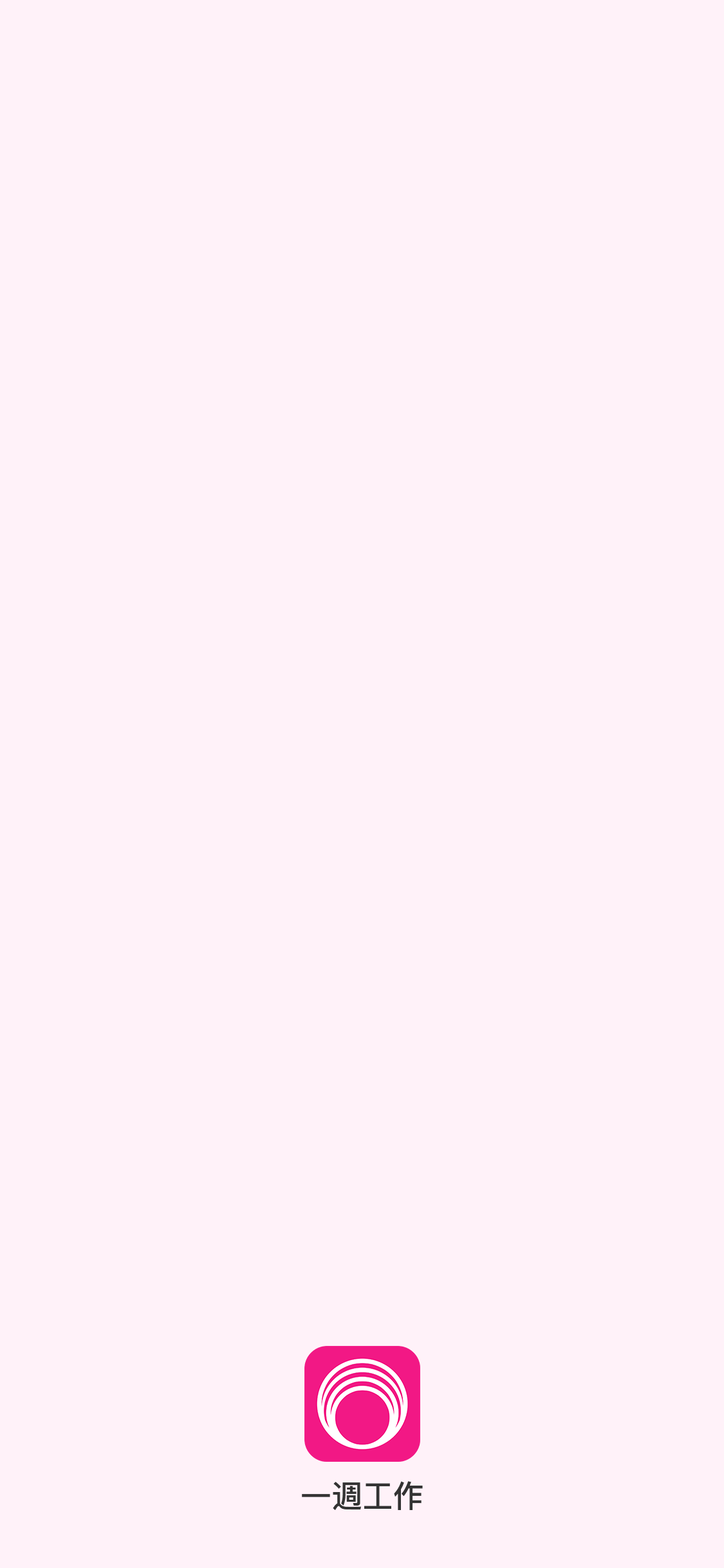
<style>
.page{position:relative;width:724px;height:1568px;background:#fff2f9}
.page>*{position:absolute;margin:0}
.t1{font:30.9px "PingFang-SC-Bold";color:#333333}
</style>
<div class="page">
<p class="t1" style="left:302px;top:1481px;width:121px;height:29px">一週工作</p>
</div>
